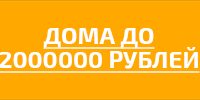
<style>
.page{position:relative;width:200px;height:100px;background:#ffa800}
.page>*{position:absolute;margin:0}
.t1{font:24px/24px "Exo2-Bold";color:#ffffff;text-decoration:underline}
</style>
<div class="page">
<p class="t1" style="left:0px;top:28px;width:200px;height:45px;text-align:center">ДОМА ДО<br>2000000 РУБЛЕЙ</p>
</div>
